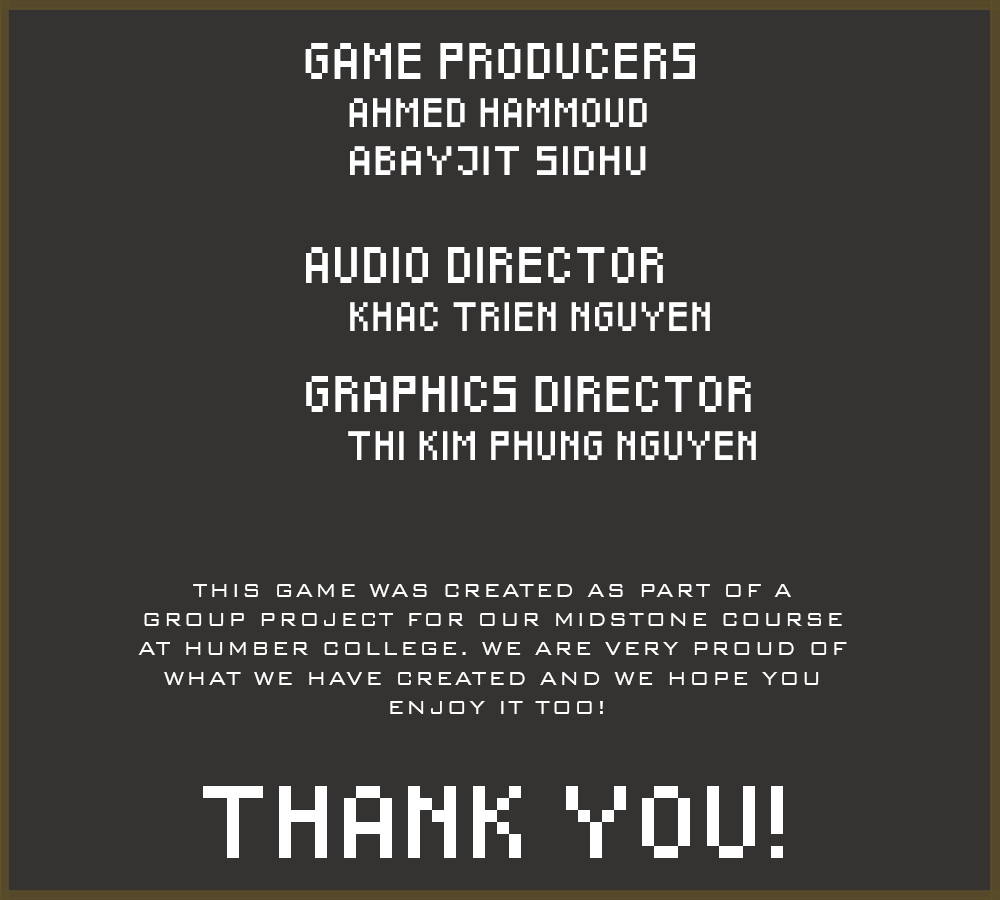
<style>
.page{position:relative;width:1000px;height:900px;background:#343331}
.page>*{position:absolute;margin:0}
.t1{font:30px "Pixeled";letter-spacing:0.075em;color:#ffffff;scale:0.9 1}
.t2{font:24px "Pixeled";letter-spacing:0.075em;color:#ffffff;scale:0.9 1}
.t3{font:24px "Pixeled";letter-spacing:0.075em;color:#ffffff}
.t4{font:24.4px "BankGothicBT-Light";letter-spacing:0.075em;color:#ffffff}
.t5{font:60px "Pixeled";letter-spacing:0.075em;color:#ffffff}
</style>
<div class="page">
<p class="t1" style="left:305px;top:43px;width:390px;height:36px">GAME PRODUCERS</p>
<p class="t2" style="left:349px;top:98px;width:298px;height:29px">AHMED HAMMOUD</p>
<p class="t3" style="left:350px;top:146px;width:296px;height:29px">ABAYJIT SIDHU</p>
<p class="t1" style="left:306px;top:247px;width:357px;height:36px">AUDIO DIRECTOR</p>
<p class="t2" style="left:350px;top:302px;width:360px;height:29px">KHAC TRIEN NGUYEN</p>
<p class="t1" style="left:306px;top:376px;width:445px;height:36px">GRAPHICS DIRECTOR</p>
<p class="t2" style="left:348px;top:431px;width:408px;height:29px">THI KIM PHUNG NGUYEN</p>
<p class="t4" style="left:138px;top:584px;width:709px;height:130px;text-align:center">THIS GAME WAS CREATED AS PART OF A <br>GROUP PROJECT FOR OUR MIDSTONE COURSE <br>AT HUMBER COLLEGE. WE ARE VERY PROUD OF <br>WHAT WE HAVE CREATED AND WE HOPE YOU <br>ENJOY IT TOO!</p>
<p class="t5" style="left:203px;top:786px;width:580px;height:72px">THANK YOU!</p>
</div>
